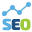
<style>
.page{position:relative;width:32px;height:32px;background:#ffffff}
.page>*{position:absolute;margin:0}
.t1{font:16px "Exo2-Black";letter-spacing:-0.04em;color:#59afe2}
.t2{font:16px "Exo2-Black";letter-spacing:-0.04em;color:#205081}
.t3{font:16px "Exo2-Black";letter-spacing:-0.04em;color:#9ec83b}
</style>
<div class="page">
<p class="t1" style="left:2px;top:18px;width:29px;height:13px">S<span class="t2">E</span><span class="t3">O</span></p>
</div>
